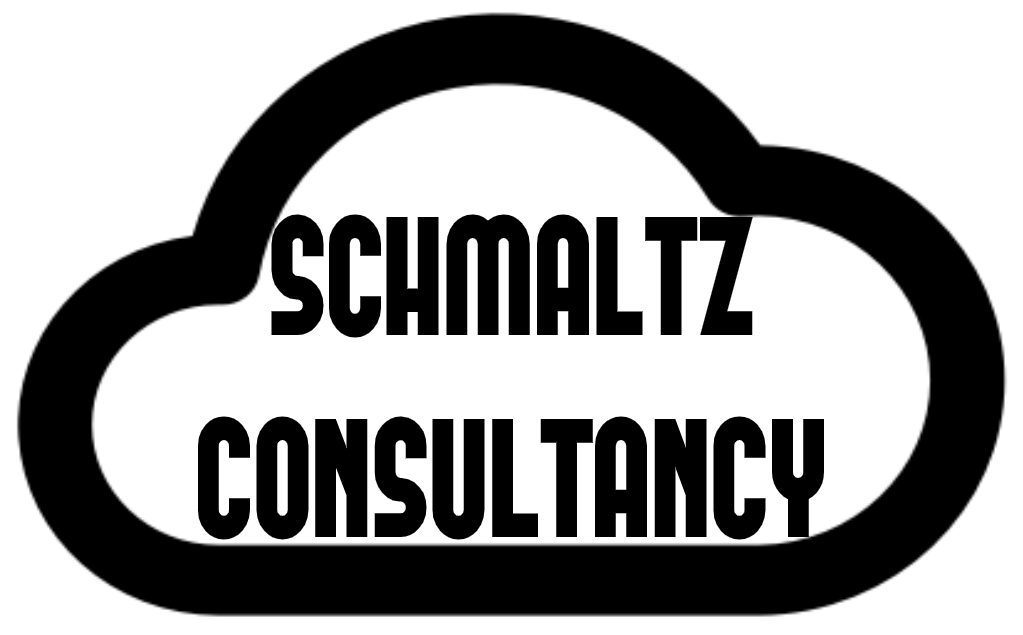
<style>
.page{position:relative;width:1023px;height:635px;background:#ffffff}
.page>*{position:absolute;margin:0}
.t1{font:168.6px "FORQUE";color:#000000;scale:0.88 1}
</style>
<div class="page">
<p class="t1" style="left:197px;top:214px;width:628px;height:326px;text-align:center">SCHMALTZ<br>CONSULTANCY</p>
</div>
